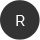
<style>
.page{position:relative;width:40px;height:40px;background:#333333}
.page>*{position:absolute;margin:0}
.t1{font:15.1px "Raleway-Medium";letter-spacing:0.04em;color:#ffffff}
</style>
<div class="page">
<p class="t1" style="left:16px;top:15px;width:9px;height:11px">R</p>
</div>
